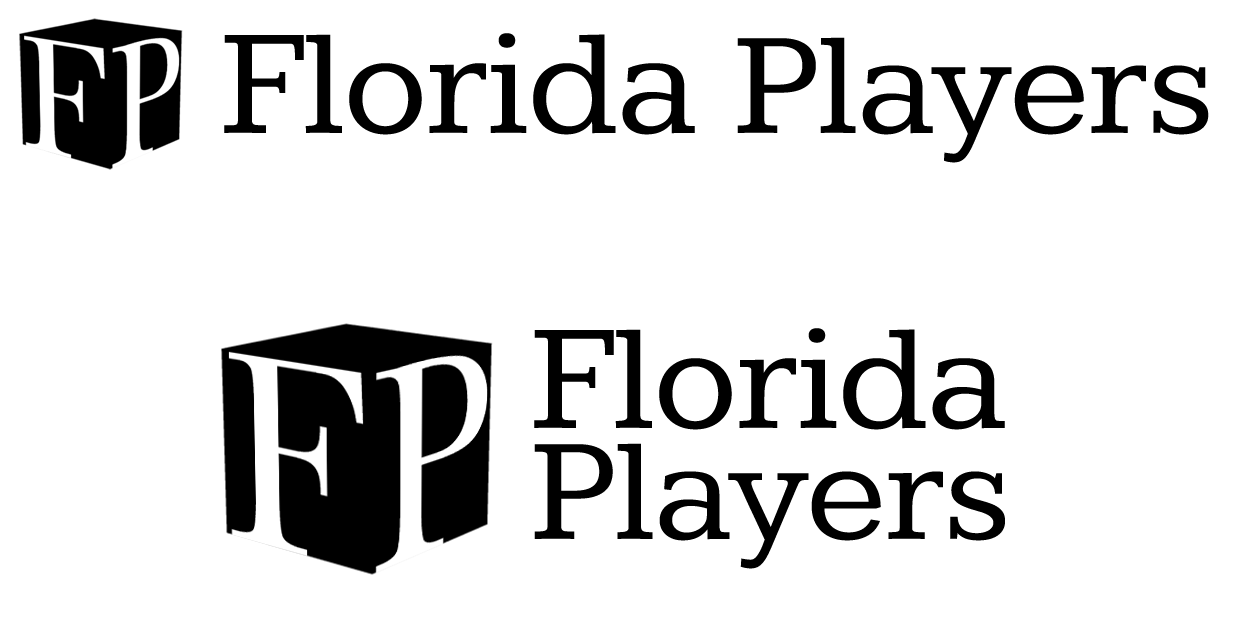
<style>
.page{position:relative;width:1234px;height:628px;background:#ffffff}
.page>*{position:absolute;margin:0}
.t1{font:155px "Kameron";letter-spacing:-0.01em;color:#000000}
.t2{font:150px "Kameron";letter-spacing:-0.01em;color:#000000}
.t3{font:155px/111px "Kameron";letter-spacing:-0.01em;color:#000000}
.t4{font:150px/111px "Kameron";letter-spacing:-0.01em;color:#000000}
</style>
<div class="page">
<p class="t1" style="left:224px;top:33px;width:985px;height:130px">Florida <span class="t2">Players</span></p>
<p class="t3" style="left:534px;top:328px;width:471px;height:241px">Florida<br><span class="t4">Players</span></p>
</div>
